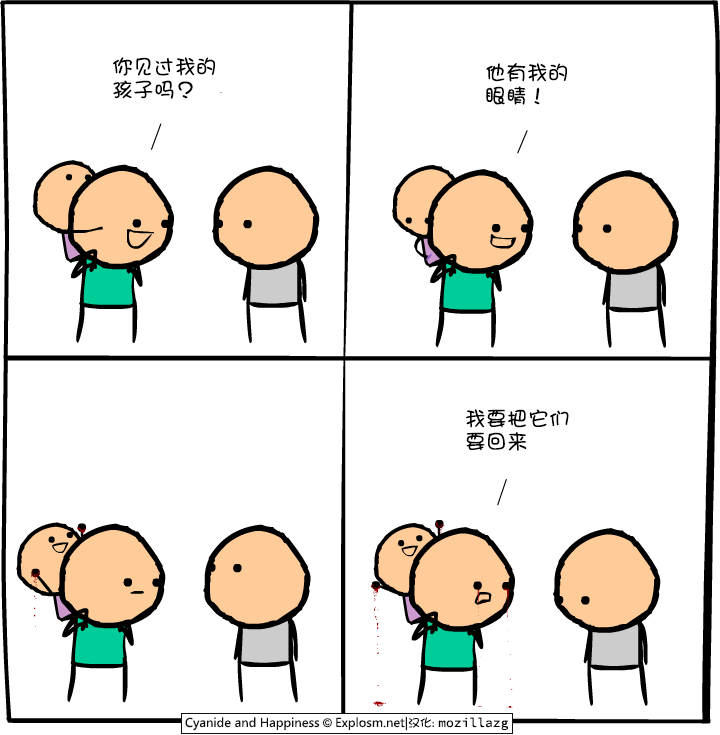
<style>
.page{position:relative;width:720px;height:735px;background:#ffffff}
.page>*{position:absolute;margin:0}
.t1{font:21px/23px "DFGirl";color:#000000}
</style>
<div class="page">
<p class="t1" style="left:113px;top:57px;width:102px;height:42px">你见过我的<br>孩子吗？</p>
<p class="t1" style="left:486px;top:63px;width:81px;height:42px">他有我的<br>眼睛！</p>
<p class="t1" style="left:466px;top:409px;width:103px;height:42px">我要把它们<br>要回来</p>
</div>
